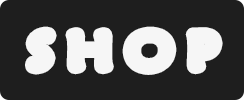
<style>
.page{position:relative;width:244px;height:100px;background:#1e1e1e}
.page>*{position:absolute;margin:0}
.t1{font:48.1px "MaiandraGD-Regular";letter-spacing:0.28em;color:#f6f6f6;font-weight:bold;scale:1.11 1}
</style>
<div class="page">
<p class="t1" style="left:31px;top:32px;width:186px;height:37px">SHOP</p>
</div>
